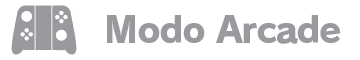
<style>
.page{position:relative;width:360px;height:60px;background:#ffffff}
.page>*{position:absolute;margin:0}
.t1{font:36px "RodinPro-EB";letter-spacing:-0.038em;color:#989a9d}
</style>
<div class="page">
<p class="t1" style="left:107px;top:15px;width:234px;height:29px">Modo Arcade</p>
</div>
